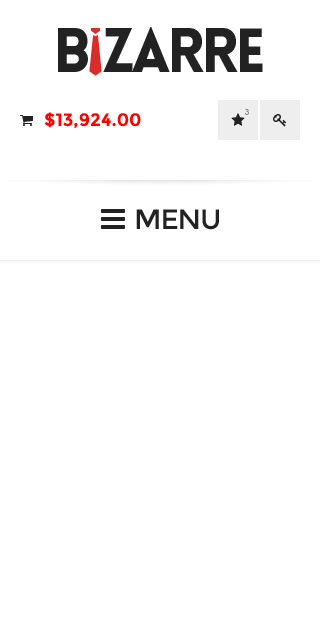
<style>
.page{position:relative;width:320px;height:640px;background:#ffffff}
.page>*{position:absolute;margin:0}
.t1{font:61px "Lovelo-Black";letter-spacing:-0.06em;color:#222222;text-transform:uppercase}
.t2{font:61px "Lovelo-Black";letter-spacing:-0.06em;color:#ffffff;text-transform:uppercase}
.t3{font:18px "Montserrat-Bold";color:#ff0000}
.t4{font:8px "ArialMT";color:#888888}
.t5{font:28px "Montserrat-Regular";letter-spacing:-0.04em;color:#222222;text-transform:uppercase}
</style>
<div class="page">
<p class="t1" style="left:58px;top:27px;width:205px;height:45px">B<span class="t2">i</span>zarre</p>
<p class="t3" style="left:44px;top:112px;width:97px;height:16px">$13,924.00</p>
<p class="t4" style="left:245px;top:109px;width:4px;height:6px">3</p>
<p class="t5" style="left:136px;top:209px;width:83px;height:21px">menu</p>
</div>
